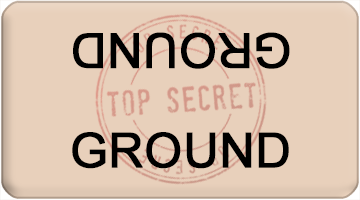
<style>
.page{position:relative;width:360px;height:200px;background:#e8d0bb}
.page>*{position:absolute;margin:0}
.t1{font:48px "ArialMT";color:#000000;font-weight:bold}
</style>
<div class="page">
<p class="t1" style="left:73px;top:32px;width:217px;height:37px;rotate:180deg">GROUND</p>
<p class="t1" style="left:72px;top:132px;width:217px;height:37px">GROUND</p>
</div>
